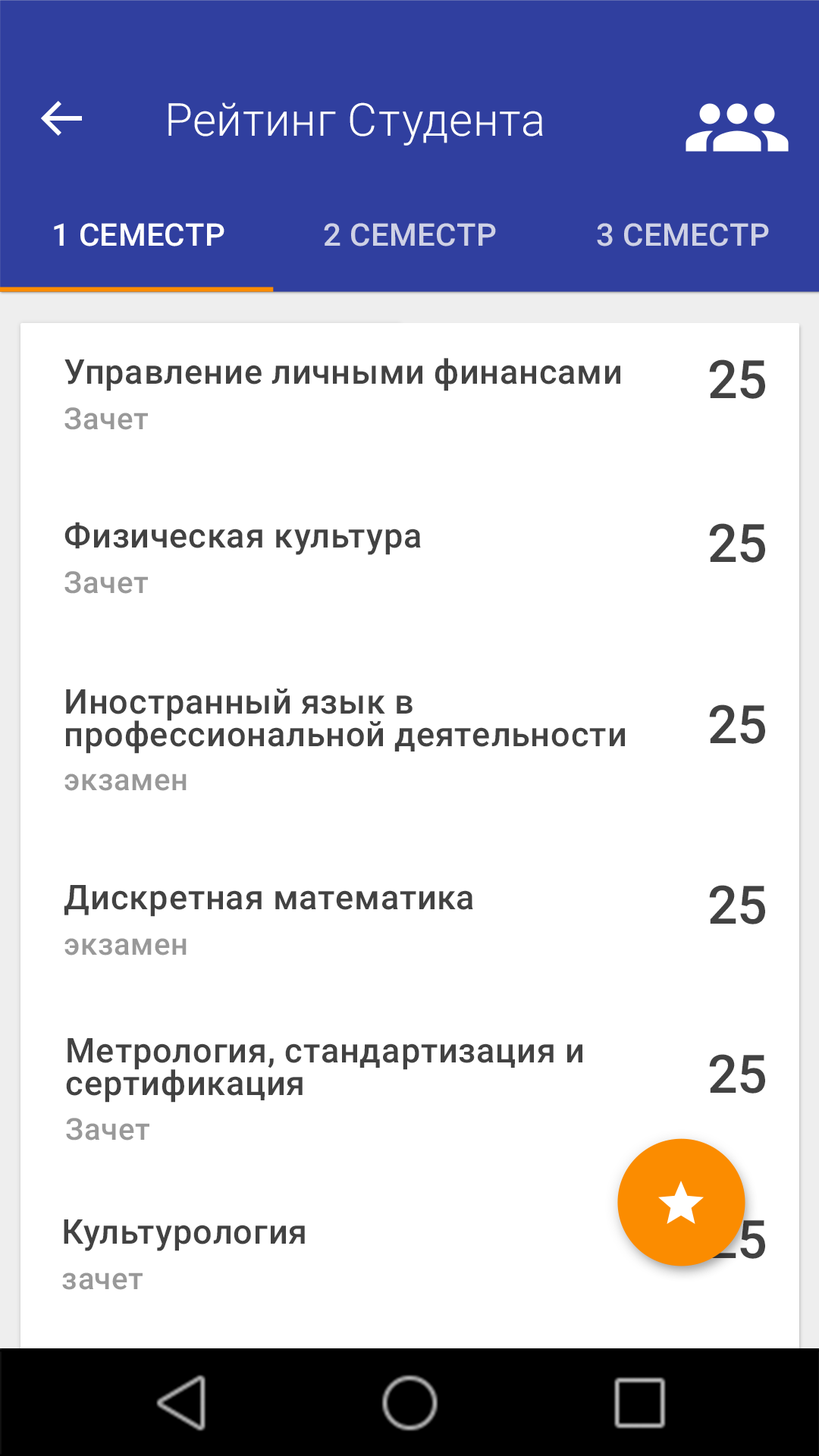
<style>
.page{position:relative;width:819px;height:1456px;background:#ffffff}
.page>*{position:absolute;margin:0}
.t1{font:45.5px "Roboto-Light";letter-spacing:0.005em;color:#ffffff}
.t2{font:31.1px "Roboto-Medium";letter-spacing:0.01em;color:#ffffff}
.t3{font:31.1px "Roboto-Medium";letter-spacing:0.01em;color:#ced1e5}
.t4{font:34.1px "Roboto-Medium";letter-spacing:0.01em;color:#424242}
.t5{font:53.1px "Roboto-Medium";letter-spacing:0.01em;color:#424242}
.t6{font:30.3px "Roboto-Medium";letter-spacing:0.01em;color:#999999}
.t7{font:34.1px/32.8px "Roboto-Medium";letter-spacing:0.01em;color:#424242}
.t8{font:53.1px "Roboto-Medium";letter-spacing:0.01em}
</style>
<div class="page">
<p class="t1" style="left:168px;top:102px;width:375px;height:44px">Рейтинг Студента</p>
<p class="t2" style="left:54px;top:223px;width:170px;height:23px">1 СЕМЕСТР</p>
<p class="t3" style="left:324px;top:223px;width:172px;height:23px">2 СЕМЕСТР</p>
<p class="t3" style="left:597px;top:223px;width:172px;height:23px">3 СЕМЕСТР</p>
<p class="t4" style="left:64px;top:358px;width:556px;height:33px">Управление личными финансами</p>
<p class="t5" style="left:709px;top:359px;width:56px;height:40px">25</p>
<p class="t6" style="left:64px;top:407px;width:84px;height:23px">Зачет</p>
<p class="t4" style="left:64px;top:522px;width:357px;height:33px">Физическая культура</p>
<p class="t5" style="left:709px;top:523px;width:56px;height:40px">25</p>
<p class="t6" style="left:64px;top:571px;width:84px;height:23px">Зачет</p>
<p class="t7" style="left:66px;top:689px;width:559px;height:65px">Иностранный язык в профессиональной деятельности</p>
<p class="t5" style="left:709px;top:704px;width:56px;height:40px">25</p>
<p class="t6" style="left:64px;top:773px;width:123px;height:18px">экзамен</p>
<p class="t4" style="left:64px;top:885px;width:409px;height:32px">Дискретная математика</p>
<p class="t5" style="left:709px;top:885px;width:56px;height:39px">25</p>
<p class="t6" style="left:64px;top:938px;width:123px;height:17px">экзамен</p>
<p class="t7" style="left:66px;top:1038px;width:516px;height:65px">Метрология, стандартизация и сертификация</p>
<p class="t5" style="left:709px;top:1054px;width:56px;height:40px">25</p>
<p class="t6" style="left:66px;top:1118px;width:83px;height:23px">Зачет</p>
<p class="t4" style="left:64px;top:1219px;width:241px;height:32px">Культурология</p>
<p class="t8" style="left:709px;top:1219px;width:56px;height:40px">25</p>
<p class="t6" style="left:62px;top:1272px;width:81px;height:18px">зачет</p>
</div>
